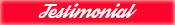
<style>
.page{position:relative;width:175px;height:25px}
.page>*{position:absolute;margin:0}
.t1{font:14.2px "Streetwear";color:#fdfcfc;scale:1.07 1}
</style>
<div class="page">
<p class="t1" style="left:38px;top:3px;width:99px;height:15px">Testimonial</p>
</div>
